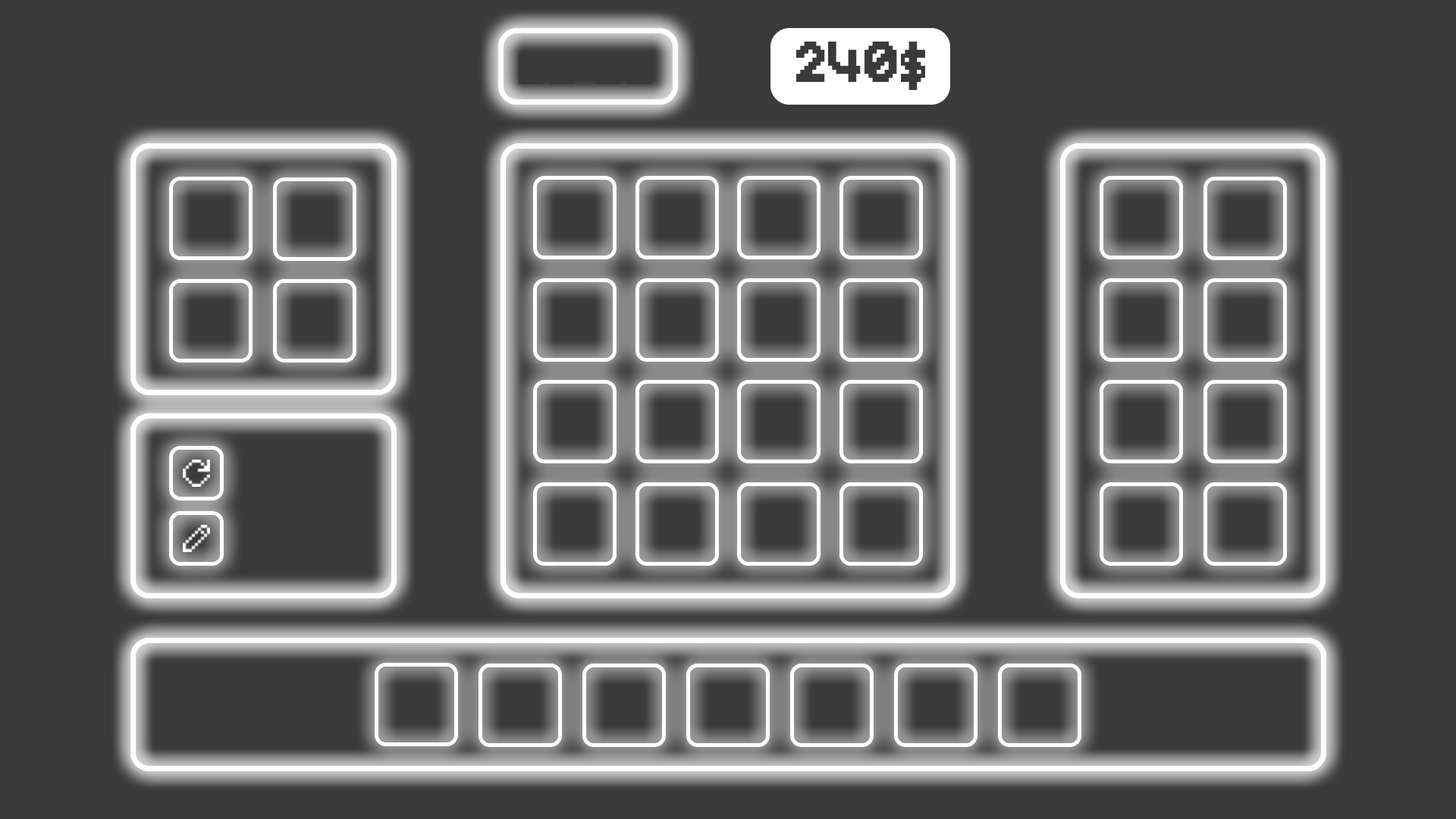
<style>
.page{position:relative;width:1456px;height:819px;background:#3a3a3a}
.page>*{position:absolute;margin:0}
.t1{font:64.5px "DigitalDisco";color:#3a3a3a}
</style>
<div class="page">
<p class="t1" style="left:796px;top:41px;width:129px;height:49px">240$</p>
</div>
